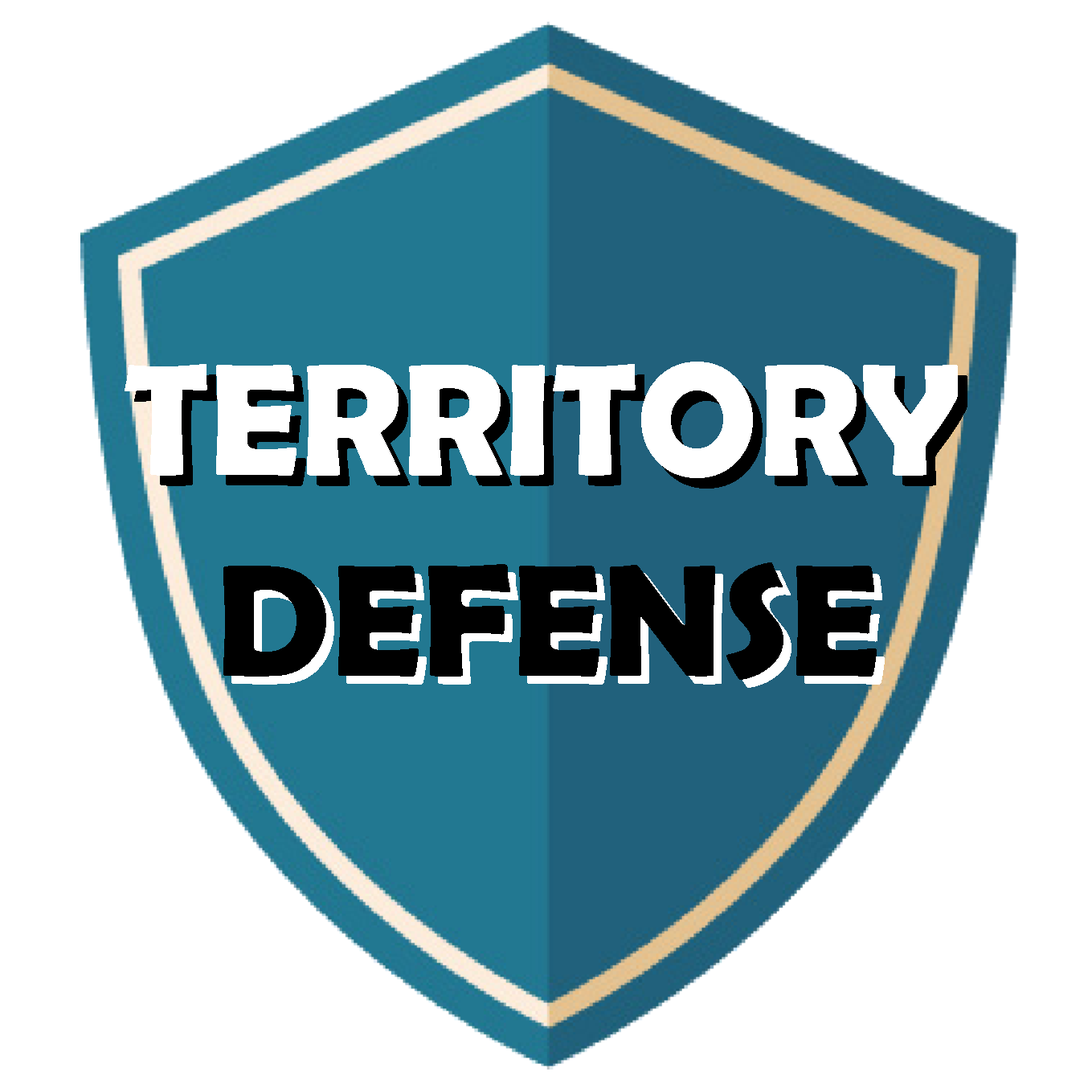
<style>
.page{position:relative;width:1092px;height:1092px;background:#ffffff}
.page>*{position:absolute;margin:0}
.t1{font:160.7px "BerlinSansFBDemi-Bold";color:#ffffff}
.t2{font:160.7px "BerlinSansFBDemi-Bold";color:#000000}
</style>
<div class="page">
<p class="t1" style="left:125px;top:362px;width:833px;height:116px">TERRITORY</p>
<p class="t2" style="left:223px;top:562px;width:654px;height:118px">DEFENSE</p>
</div>
